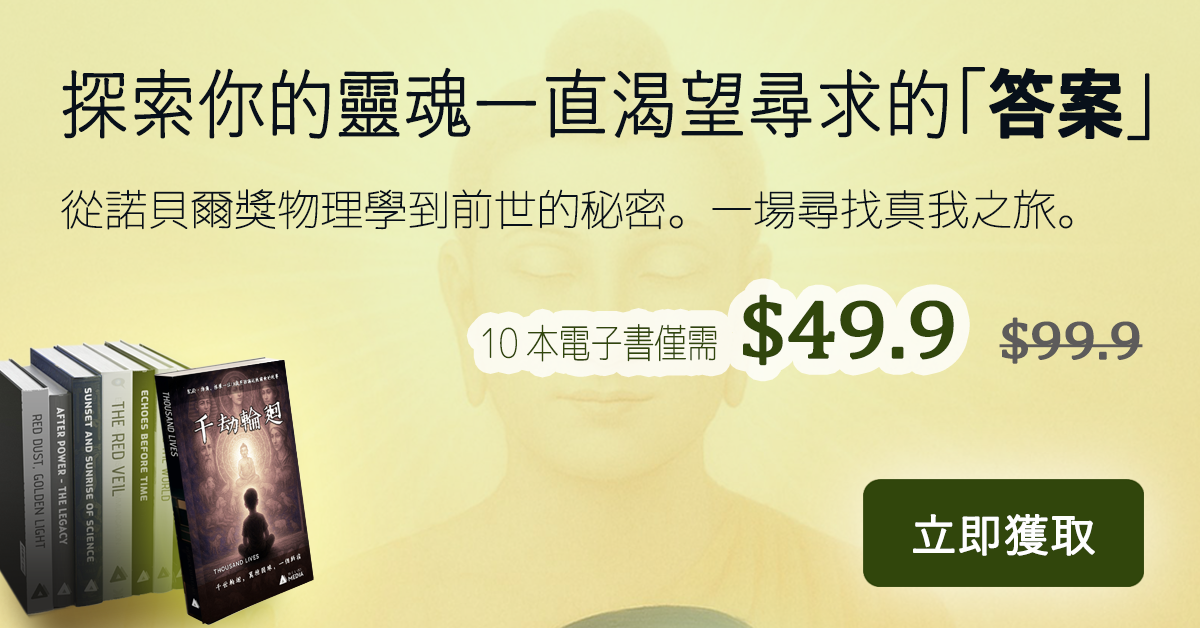
<style>
.page{position:relative;width:1200px;height:628px}
.page>*{position:absolute;margin:0}
.t1{font:75px "YuGothic-Light";letter-spacing:-0.01em;color:#08101a;font-weight:bold;scale:0.9 1}
.t2{font:75px "YuGothic-Bold";letter-spacing:-0.01em;color:#08101a;font-weight:bold;scale:0.9 1}
.t3{font:43.2px "Chogokuboso-Gothic";letter-spacing:-0.025em;color:#08101a;font-weight:bold}
.t4{font:40px "Chogokuboso-Gothic";letter-spacing:-0.025em;color:#31460c;font-weight:bold;scale:0.8 1}
.t5{font:82.8px "Cambria";letter-spacing:-0.025em;color:#31460c;font-weight:bold;scale:1.11 1}
.t6{font:54px "Cambria";letter-spacing:-0.025em;color:#5d5b5b;font-weight:bold;scale:1.11 1}
.t7{font:45px "YuGothic-Medium";color:#fefefe;font-weight:bold}
</style>
<div class="page">
<p class="t1" style="left:62px;top:67px;width:1088px;height:74px">探索你的靈魂一直渴望尋求的「<span class="t2">答案</span>」</p>
<p class="t3" style="left:61px;top:188px;width:1012px;height:42px">從諾貝爾獎物理學到前世的秘密。一場尋找真我之旅。</p>
<p class="t4" style="left:482px;top:294px;width:472px;height:72px">10 本電子書僅需<span class="t5"> $49.9</span></p>
<p class="t6" style="left:999px;top:317px;width:144px;height:47px">$99.9</p>
<p class="t7" style="left:913px;top:514px;width:182px;height:42px">立即獲取</p>
</div>
